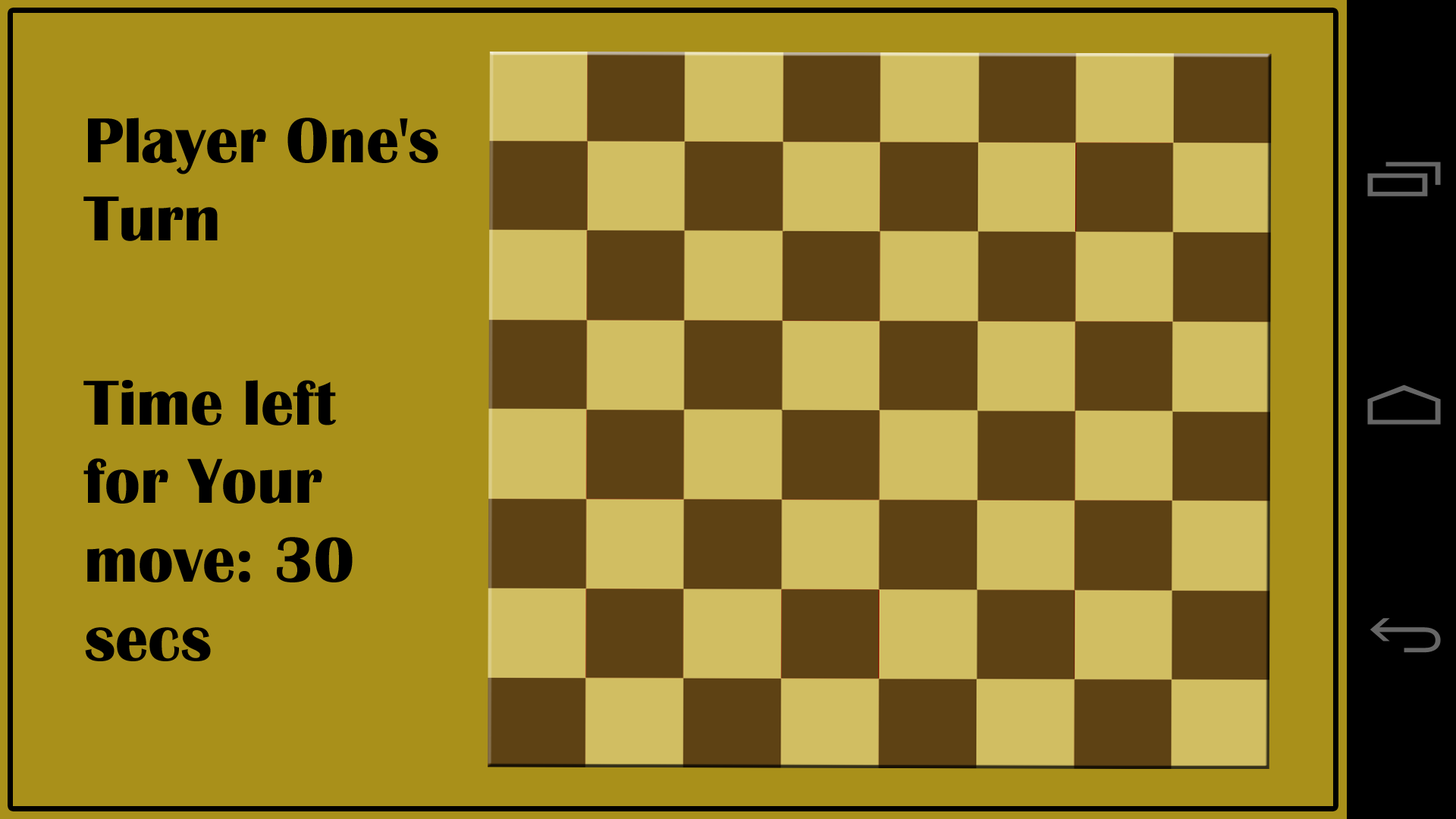
<style>
.page{position:relative;width:1456px;height:819px;background:#a9901a}
.page>*{position:absolute;margin:0}
.t1{font:65.6px "BritannicBold";color:#000000}
</style>
<div class="page">
<p class="t1" style="left:83px;top:118px;width:355px;height:123px">Player One's<br>Turn</p>
<p class="t1" style="left:83px;top:380px;width:270px;height:281px">Time left for Your move: 30 secs</p>
</div>
